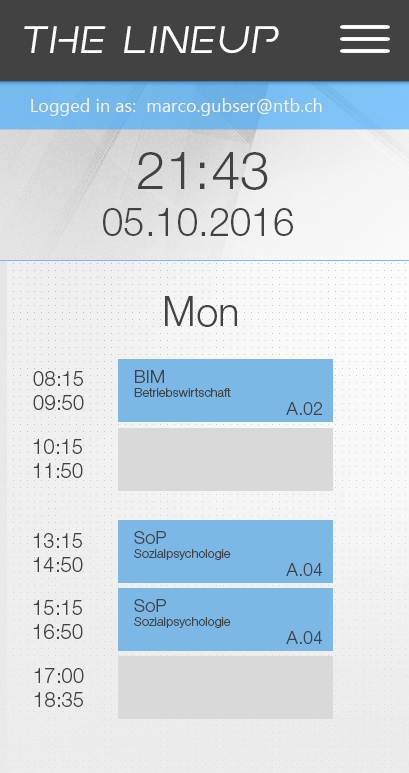
<style>
.page{position:relative;width:409px;height:773px}
.page>*{position:absolute;margin:0}
.t1{font:43.1px "EarthOrbiterSemi-Italic";letter-spacing:0.005em;color:#ffffff}
.t2{font:18px "SegoeUI";letter-spacing:0.005em;color:#f2f2f2}
.t3{font:52.7px "HelveticaNeueLTStd-Lt";letter-spacing:0.005em;color:#424242}
.t4{font:38.3px "HelveticaNeueLTStd-Lt";letter-spacing:0.005em;color:#424242}
.t5{font:40.4px "HelveticaNeueLTStd-Lt";letter-spacing:0.005em;color:#424242}
.t6{font:20.1px "HelveticaNeueLTStd-Lt";letter-spacing:0.005em;color:#424242}
.t7{font:18px "HelveticaNeueLTStd-Lt";letter-spacing:0.005em;color:#424242}
.t8{font:12.5px "HelveticaNeueLTStd-Lt";letter-spacing:0.005em;color:#424242}
</style>
<div class="page">
<p class="t1" style="left:24px;top:26px;width:255px;height:28px">The Lineup</p>
<p class="t2" style="left:31px;top:98px;width:291px;height:18px">Logged in as:  marco.gubser@ntb.ch</p>
<p class="t3" style="left:137px;top:152px;width:131px;height:38px">21:43</p>
<p class="t4" style="left:103px;top:208px;width:190px;height:28px">05.10.2016</p>
<p class="t5" style="left:165px;top:296px;width:72px;height:31px">Mon</p>
<p class="t6" style="left:33px;top:371px;width:51px;height:39px">08:15<br>09:50</p>
<p class="t7" style="left:135px;top:370px;width:29px;height:13px">BIM</p>
<p class="t8" style="left:134px;top:388px;width:97px;height:9px">Betriebswirtschaft</p>
<p class="t7" style="left:286px;top:402px;width:36px;height:13px">A.02</p>
<p class="t6" style="left:33px;top:439px;width:50px;height:39px">10:15<br>11:50</p>
<p class="t6" style="left:33px;top:533px;width:50px;height:39px">13:15<br>14:50</p>
<p class="t7" style="left:134px;top:531px;width:32px;height:13px">SoP</p>
<p class="t8" style="left:134px;top:549px;width:97px;height:11px">Sozialpsychologie</p>
<p class="t7" style="left:286px;top:563px;width:37px;height:13px">A.04</p>
<p class="t6" style="left:33px;top:600px;width:50px;height:39px">15:15<br>16:50</p>
<p class="t7" style="left:134px;top:599px;width:32px;height:13px">SoP</p>
<p class="t8" style="left:134px;top:617px;width:97px;height:11px">Sozialpsychologie</p>
<p class="t7" style="left:286px;top:631px;width:37px;height:13px">A.04</p>
<p class="t6" style="left:34px;top:668px;width:50px;height:39px">17:00<br>18:35</p>
</div>
